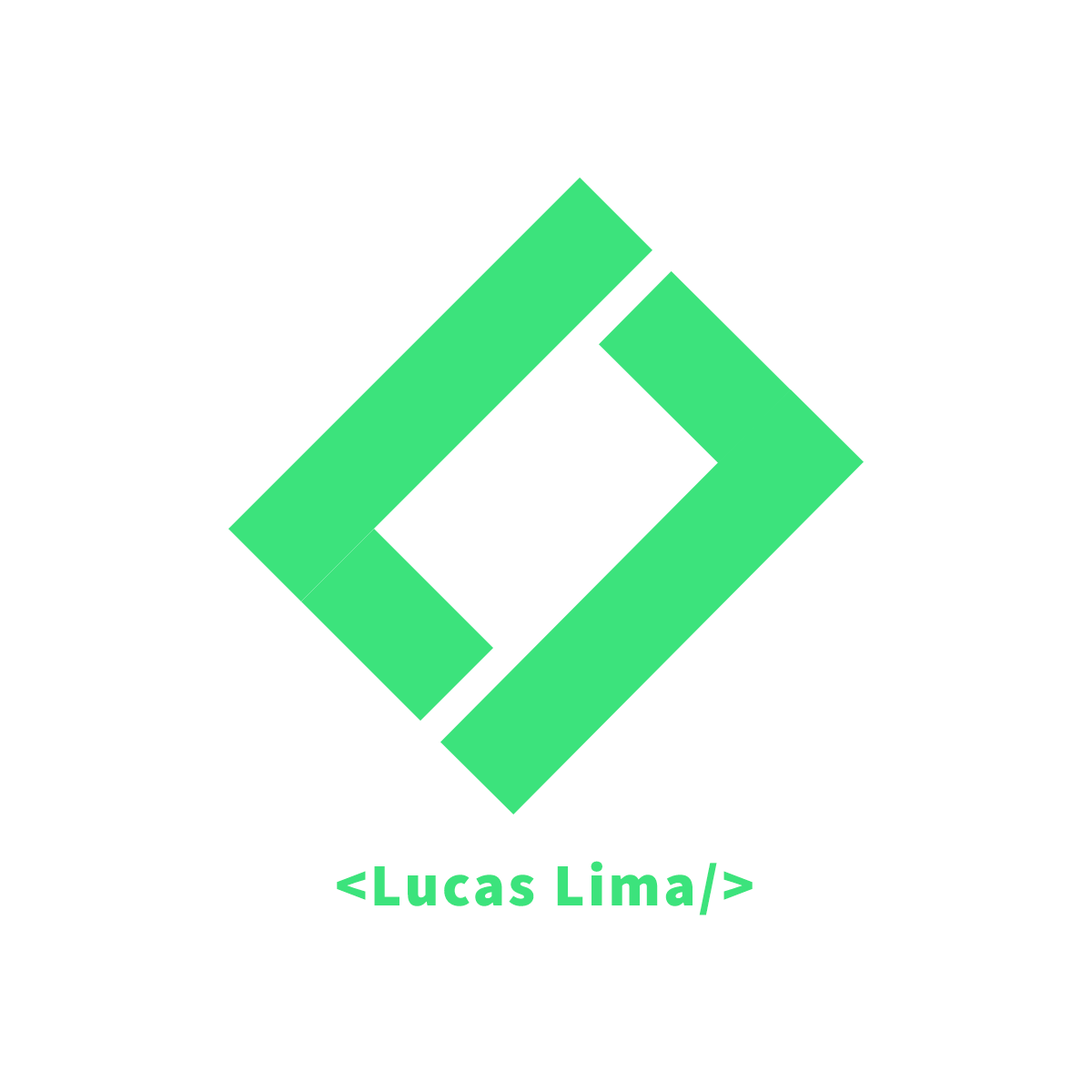
<style>
.page{position:relative;width:1092px;height:1092px;background:#ffffff}
.page>*{position:absolute;margin:0}
.t1{font:60px "SourceSansRoman-Black";letter-spacing:0.05em;color:#3ce37c}
</style>
<div class="page">
<p class="t1" style="left:337px;top:861px;width:416px;height:54px">&lt;Lucas Lima/&gt;</p>
</div>
